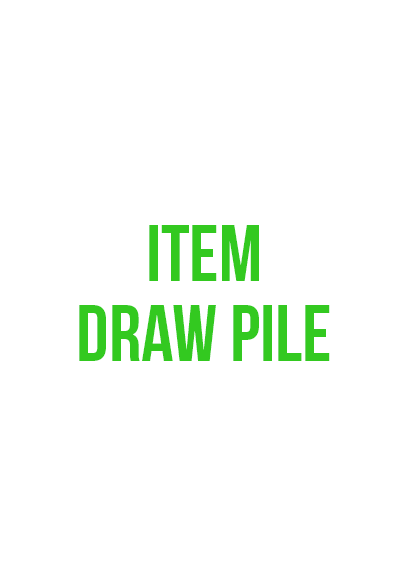
<style>
.page{position:relative;width:408px;height:585px;background:#ffffff}
.page>*{position:absolute;margin:0}
.t1{font:80px/80px "BebasNeue";color:#33c920}
</style>
<div class="page">
<p class="t1" style="left:79px;top:225px;width:251px;height:136px;text-align:center">item<br>draw pile</p>
</div>
